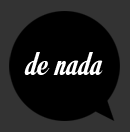
<style>
.page{position:relative;width:130px;height:132px;background:#000000}
.page>*{position:absolute;margin:0}
.t1{font:37.7px "MotionPicturePersonalUse";letter-spacing:0.01em;color:#ffffff}
</style>
<div class="page">
<p class="t1" style="left:24px;top:52px;width:79px;height:23px">de nada</p>
</div>
